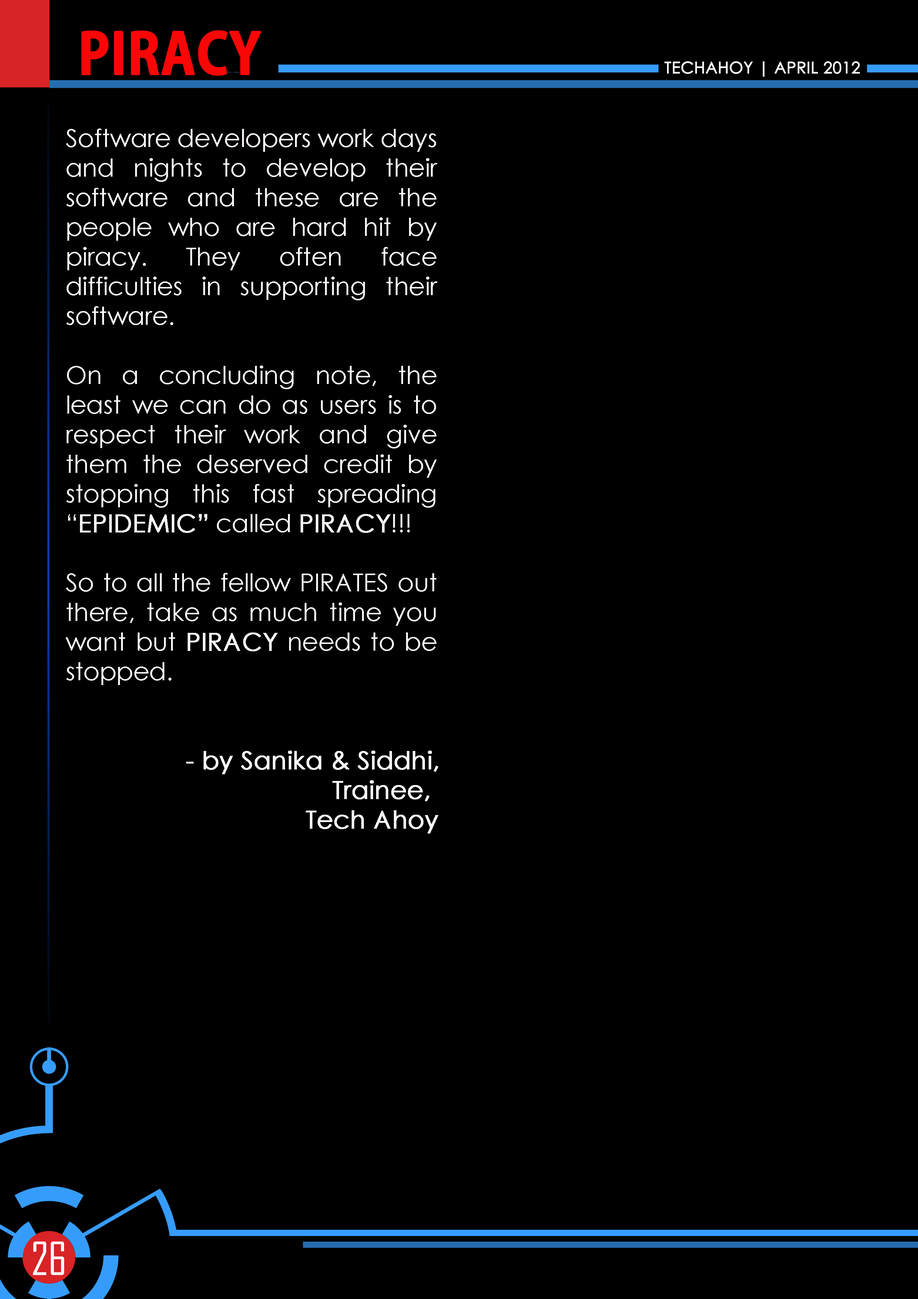
<style>
.page{position:relative;width:918px;height:1299px;background:#000000}
.page>*{position:absolute;margin:0}
.t1{font:55.5px "AdobeGothicStd-Bold";color:#f90707;text-transform:uppercase;font-weight:bold;scale:0.94 1}
.t2{font:16px "CenturyGothic";color:#ffffff;text-transform:uppercase;font-weight:bold}
.t3{font:24.7px "CenturyGothic";color:#fbf7f7}
.t4{font:24.7px "CenturyGothic";color:#fbf7f7;font-weight:bold}
.t5{font:43.7px "AgencyFB-Reg";color:#ffffff;text-transform:uppercase}
</style>
<div class="page">
<p class="t1" style="left:81px;top:30px;width:180px;height:46px">piracy</p>
<p class="t2" style="left:665px;top:61px;width:195px;height:16px">techahoy | APRIL 2012</p>
<p class="t3" style="left:66px;top:128px;width:372px;height:705px;text-align:justify">Software developers work days and nights to develop their software and these are the people who are hard hit by piracy. They often face difficulties in supporting their software.<br><br>On a concluding note, the least we can do as users is to respect their work and give them the deserved credit by stopping this fast spreading   “<span class="t4">EPIDEMIC”</span> called <span class="t4">PIRACY</span>!!!<br><br>So to all the fellow PIRATES out there, take as much time you want but <span class="t4">PIRACY</span> needs to be stopped.<br><br><br><span class="t4">         - by Sanika &amp; Siddhi,<br>                    Trainee,<br>                  Tech Ahoy</span></p>
<p class="t5" style="left:33px;top:1241px;width:31px;height:34px">26</p>
</div>
